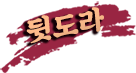
<style>
.page{position:relative;width:136px;height:73px;background:#ffffff}
.page>*{position:absolute;margin:0}
.t1{font:28.3px "SDKukdetopokki-bBd";color:#fbb989}
</style>
<div class="page">
<p class="t1" style="left:26px;top:7px;width:78px;height:37px;rotate:-10deg">뒷도라</p>
</div>
